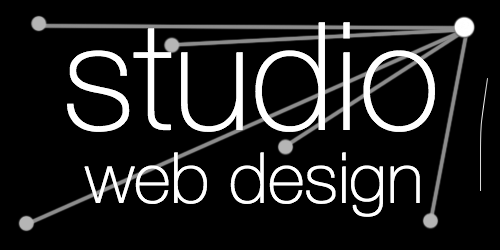
<style>
.page{position:relative;width:500px;height:250px;background:#000000}
.page>*{position:absolute;margin:0}
.t1{font:150px "HelveticaNeue-Thin";color:#ffffff}
.t2{font:70px "HelveticaNeue-Thin";color:#ffffff}
</style>
<div class="page">
<p class="t1" style="left:67px;top:22px;width:368px;height:110px">studio</p>
<p class="t2" style="left:84px;top:152px;width:336px;height:65px">web design</p>
</div>
